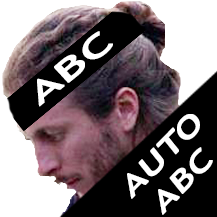
<style>
.page{position:relative;width:217px;height:217px;background:#ffffff}
.page>*{position:absolute;margin:0}
.t1{font:29.1px "TrebuchetMS";color:#ffffff;text-transform:uppercase;font-weight:bold;scale:1.86 1}
.t2{font:27.5px "TrebuchetMS";color:#ffffff;text-transform:uppercase;font-weight:bold;scale:1.5 1}
</style>
<div class="page">
<p class="t1" style="left:37px;top:31px;width:76px;height:76px;rotate:-39deg">ABC</p>
<p class="t2" style="left:127px;top:114px;width:86px;height:101px;text-align:center;rotate:-46deg">AUTO<br>ABC</p>
</div>
